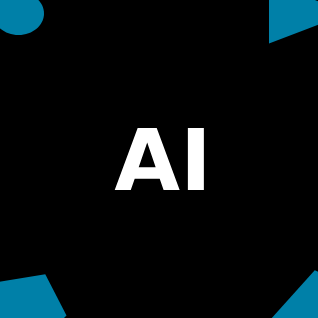
<style>
.page{position:relative;width:318px;height:318px;background:#000000}
.page>*{position:absolute;margin:0}
.t1{font:85px "DejaVuSans-Bold";color:#ffffff}
</style>
<div class="page">
<p class="t1" style="left:114px;top:128px;width:90px;height:62px">AI</p>
</div>
